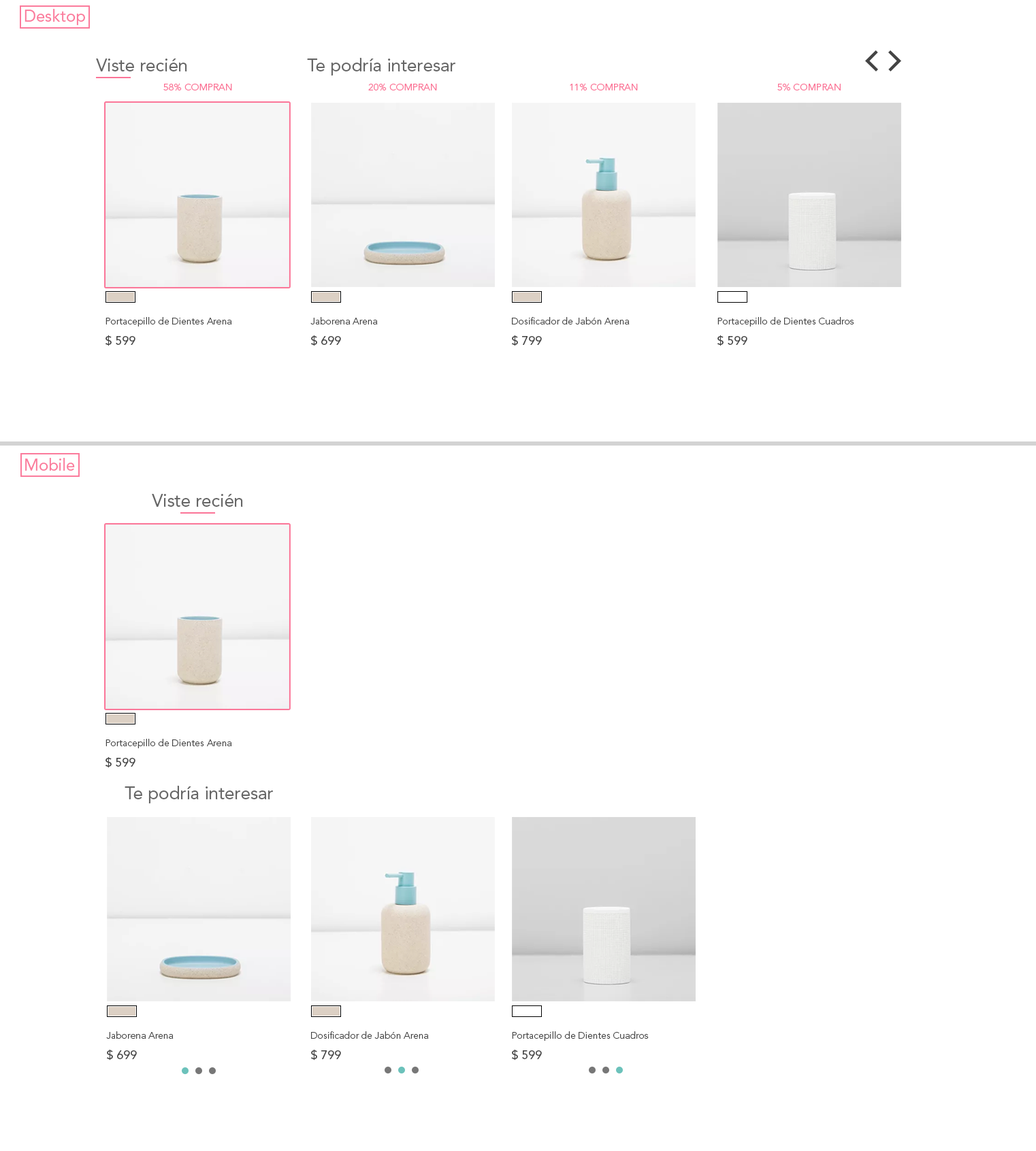
<style>
.page{position:relative;width:1036px;height:1151px;background:#ffffff}
.page>*{position:absolute;margin:0}
.t1{font:16.3px "AvenirLTStd-Roman";color:#fb7b9c}
.t2{font:17.7px "AvenirLTStd-Roman";color:#666666}
.t3{font:9.5px "AvenirLTStd-Book";color:#fb7497}
.t4{font:9.5px "AvenirLTStd-Light";color:#444444}
.t5{font:12.2px "AvenirLTStd-Roman";color:#444444}
</style>
<div class="page">
<p class="t1" style="left:24px;top:9px;width:61px;height:16px">Desktop</p>
<p class="t2" style="left:96px;top:59px;width:91px;height:12px">Viste recién</p>
<p class="t2" style="left:307px;top:58px;width:148px;height:18px">Te podría interesar</p>
<p class="t3" style="left:163px;top:83px;width:69px;height:8px">58% COMPRAN</p>
<p class="t3" style="left:368px;top:83px;width:69px;height:8px">20% COMPRAN</p>
<p class="t3" style="left:570px;top:83px;width:68px;height:8px">11% COMPRAN</p>
<p class="t3" style="left:777px;top:83px;width:63px;height:8px">5% COMPRAN</p>
<p class="t4" style="left:105px;top:317px;width:127px;height:10px">Portacepillo de Dientes Arena</p>
<p class="t4" style="left:310px;top:317px;width:68px;height:8px">Jaborena Arena</p>
<p class="t4" style="left:512px;top:317px;width:117px;height:8px">Dosificador de Jabón Arena</p>
<p class="t4" style="left:717px;top:317px;width:137px;height:10px">Portacepillo de Dientes Cuadros</p>
<p class="t5" style="left:105px;top:335px;width:30px;height:11px">$ 599</p>
<p class="t5" style="left:311px;top:335px;width:30px;height:11px">$ 699</p>
<p class="t5" style="left:512px;top:335px;width:30px;height:11px">$ 799</p>
<p class="t5" style="left:717px;top:335px;width:30px;height:11px">$ 599</p>
<p class="t1" style="left:25px;top:458px;width:50px;height:13px">Mobile</p>
<p class="t2" style="left:152px;top:494px;width:91px;height:13px">Viste recién</p>
<p class="t4" style="left:105px;top:739px;width:127px;height:10px">Portacepillo de Dientes Arena</p>
<p class="t5" style="left:105px;top:757px;width:30px;height:11px">$ 599</p>
<p class="t2" style="left:125px;top:786px;width:148px;height:18px">Te podría interesar</p>
<p class="t4" style="left:106px;top:1032px;width:68px;height:7px">Jaborena Arena</p>
<p class="t4" style="left:311px;top:1032px;width:118px;height:7px">Dosificador de Jabón Arena</p>
<p class="t4" style="left:512px;top:1032px;width:136px;height:9px">Portacepillo de Dientes Cuadros</p>
<p class="t5" style="left:107px;top:1049px;width:30px;height:12px">$ 699</p>
<p class="t5" style="left:311px;top:1049px;width:30px;height:12px">$ 799</p>
<p class="t5" style="left:512px;top:1049px;width:30px;height:12px">$ 599</p>
</div>
